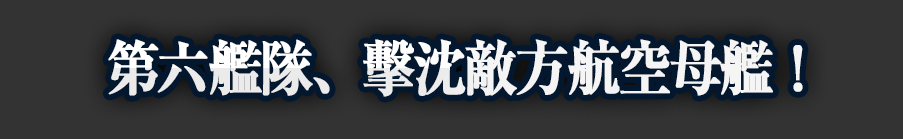
<style>
.page{position:relative;width:903px;height:139px;background:#333333}
.page>*{position:absolute;margin:0}
.t1{font:60px "RyuminPro-Bold";letter-spacing:-0.08em;color:#ffffff;font-weight:bold;scale:0.9 1}
</style>
<div class="page">
<p class="t1" style="left:108px;top:39px;width:695px;height:58px">第六艦隊、擊沈敵方航空母艦！</p>
</div>
